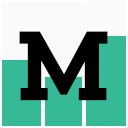
<style>
.page{position:relative;width:128px;height:128px;background:#35b996}
.page>*{position:absolute;margin:0}
.t1{font:105.6px "ZillaSlab-Bold";letter-spacing:-0.04em;color:#000000}
</style>
<div class="page">
<p class="t1" style="left:19px;top:31px;width:89px;height:70px">M</p>
</div>
